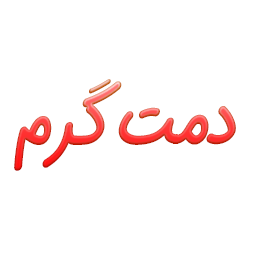
<style>
.page{position:relative;width:256px;height:256px;background:#ffffff}
.page>*{position:absolute;margin:0}
.t1{font:72.8px "IRANSansDNFaNum-Bold";letter-spacing:-0.06em;scale:0.84 1}
</style>
<div class="page">
<p class="t1" style="left:14px;top:79px;width:222px;height:92px">دمت گرم</p>
</div>
